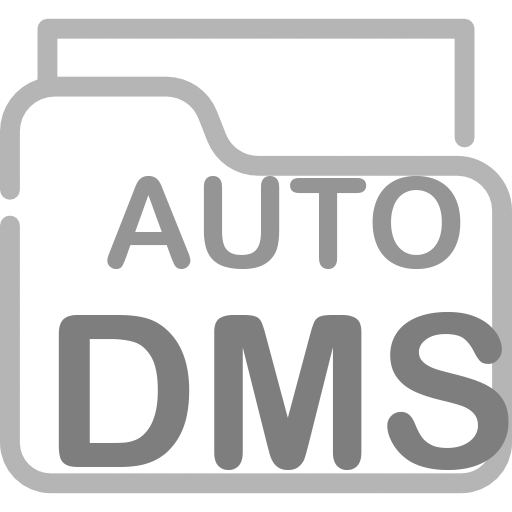
<style>
.page{position:relative;width:512px;height:512px;background:#ffffff}
.page>*{position:absolute;margin:0}
.t1{font:125px "ArialRoundedMTBold";color:#969595}
.t2{font:212.5px "ArialRoundedMTBold";color:#7e7e7e}
</style>
<div class="page">
<p class="t1" style="left:107px;top:176px;width:354px;height:93px">AUTO</p>
<p class="t2" style="left:58px;top:312px;width:451px;height:158px">DMS</p>
</div>
